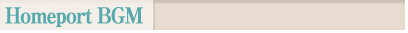
<style>
.page{position:relative;width:408px;height:33px;background:#e7dccf}
.page>*{position:absolute;margin:0}
.t1{font:22px "RyuminPro-ExBold";letter-spacing:-0.08em;color:#55abab;font-weight:bold;scale:0.9 1}
</style>
<div class="page">
<p class="t1" style="left:5px;top:7px;width:138px;height:20px">Homeport BGM</p>
</div>
